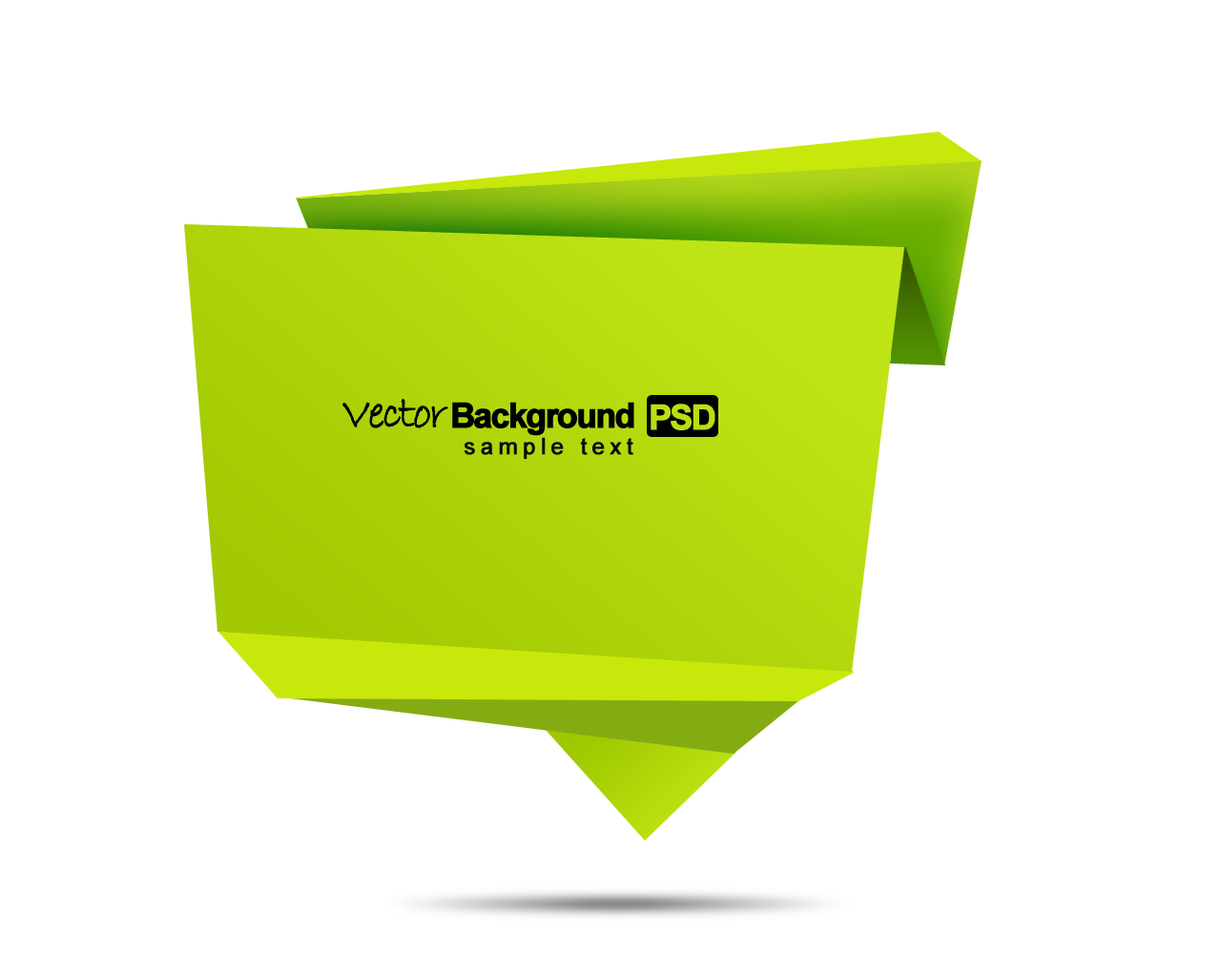
<style>
.page{position:relative;width:1221px;height:977px;background:#ffffff}
.page>*{position:absolute;margin:0}
.t1{font:45.8px "BradleyHandITC";letter-spacing:-0.075em;color:#000000;font-weight:bold}
.t2{font:34.3px "Arial-BoldMT";letter-spacing:-0.075em;color:#000000;font-weight:bold}
.t3{font:34.3px "Arial-BoldMT";letter-spacing:-0.075em;color:#b9df12;font-weight:bold}
.t4{font:22.9px "ArialMT";letter-spacing:0.2em;color:#0a0a0a;font-weight:bold}
</style>
<div class="page">
<p class="t1" style="left:342px;top:398px;width:106px;height:30px">Vector</p>
<p class="t2" style="left:452px;top:402px;width:182px;height:34px">Background</p>
<p class="t3" style="left:650px;top:403px;width:65px;height:27px">PSD</p>
<p class="t4" style="left:464px;top:437px;width:169px;height:22px">sample text</p>
</div>
